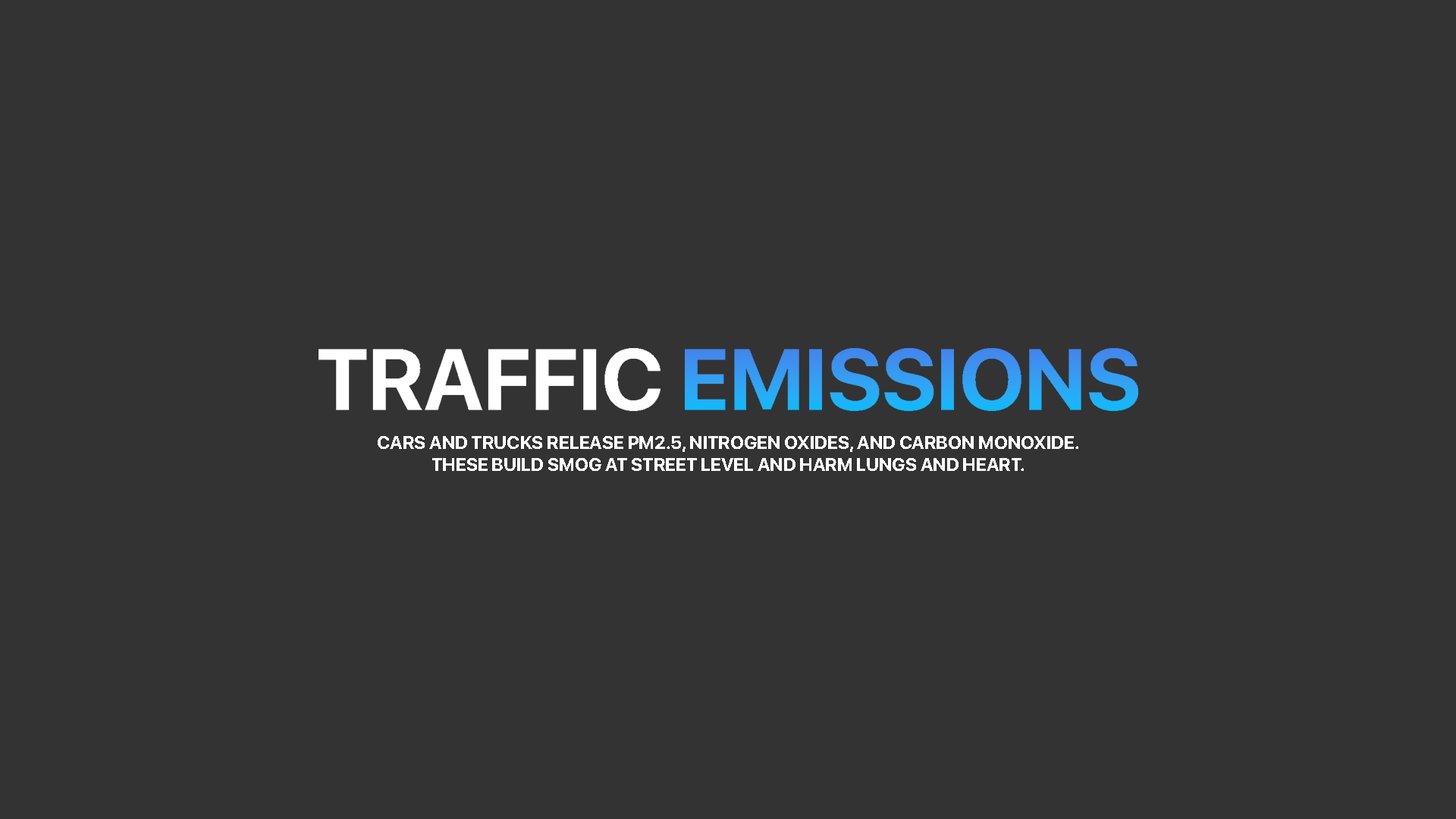
<style>
.page{position:relative;width:1456px;height:819px;background:#333333}
.page>*{position:absolute;margin:0}
.t1{font:18.3px "SFProDisplay-Bold";color:#ffffff;text-transform:uppercase}
</style>
<div class="page">
<p class="t1" style="left:378px;top:436px;width:700px;height:35px;text-align:center">Cars and trucks release PM2.5, nitrogen oxides, and carbon monoxide.<br>These build smog at street level and harm lungs and heart.</p>
</div>
